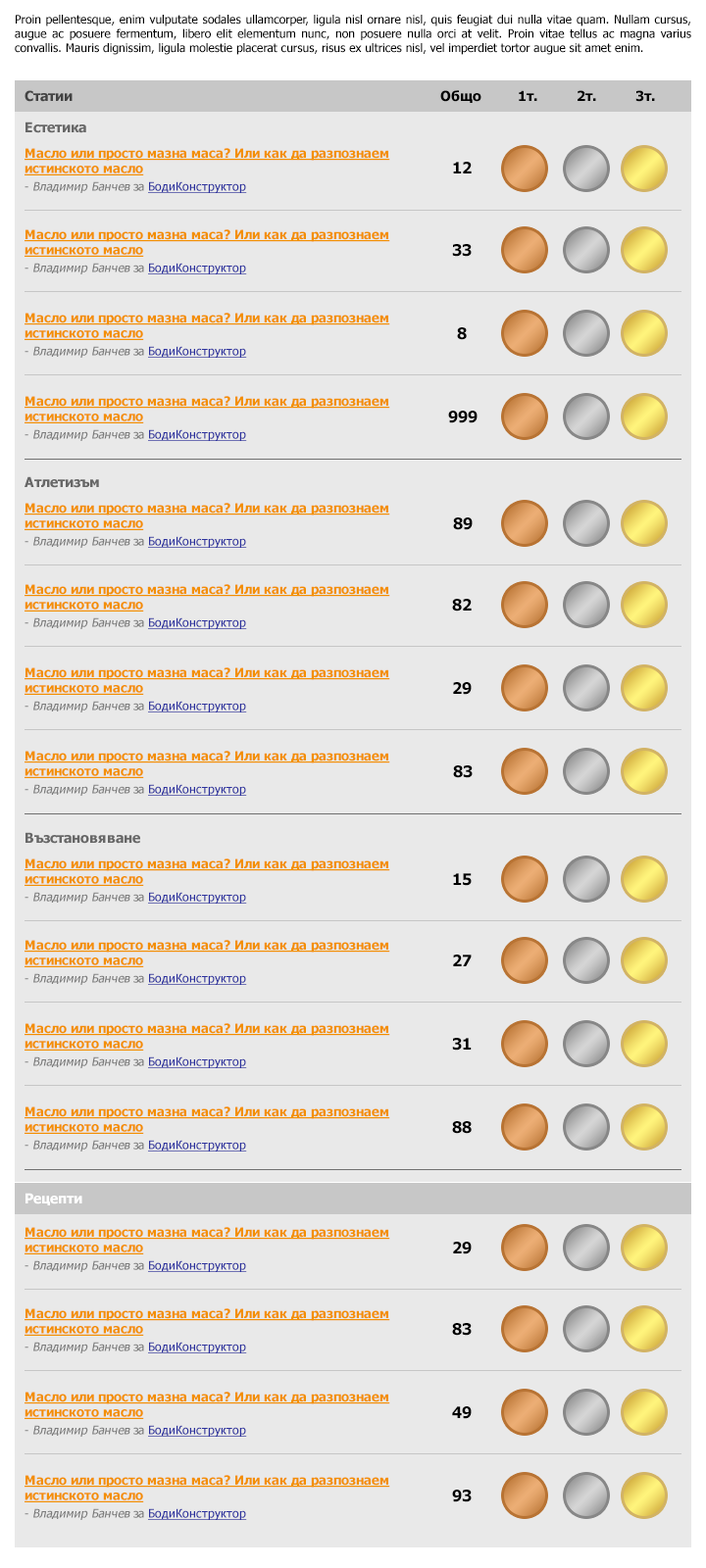
<style>
.page{position:relative;width:706px;height:1568px;background:#e9e9e9}
.page>*{position:absolute;margin:0}
.t1{font:11.8px "Tahoma";color:#000000}
.t2{font:13.7px "Tahoma-Bold";color:#434343}
.t3{font:13.7px "Tahoma-Bold";color:#000000}
.t4{font:13.7px "Tahoma-Bold";color:#676767}
.t5{font:12.7px "Tahoma-Bold";color:#f38f00;text-decoration:underline}
.t6{font:11.8px/17.6px "Tahoma";color:#7c7c7c}
.t7{font:11.8px/17.6px "Tahoma";color:#7c7c7c;font-style:italic}
.t8{font:11.8px/17.6px "Tahoma";color:#2c319e;text-decoration:underline}
.t9{font:15.7px "Tahoma-Bold";color:#000000}
.t10{font:13.7px "Tahoma-Bold";color:#ffffff}
</style>
<div class="page">
<p class="t1" style="left:15px;top:15px;width:676px;height:40px;text-align:justify">Proin pellentesque, enim vulputate sodales ullamcorper, ligula nisl ornare nisl, quis feugiat dui nulla vitae quam. Nullam cursus, augue ac posuere fermentum, libero elit elementum nunc, non posuere nulla orci at velit. Proin vitae tellus ac magna varius convallis. Mauris dignissim, ligula molestie placerat cursus, risus ex ultrices nisl, vel imperdiet tortor augue sit amet enim.</p>
<p class="t2" style="left:24px;top:90px;width:49px;height:12px">Статии</p>
<p class="t3" style="left:440px;top:90px;width:41px;height:13px">Общо</p>
<p class="t3" style="left:518px;top:90px;width:137px;height:12px">1т.          2т.          3т.</p>
<p class="t4" style="left:25px;top:122px;width:61px;height:11px">Естетика</p>
<p class="t5" style="left:24px;top:148px;width:366px;height:45px">Масло или просто мазна маса? Или как да разпознаем истинското масло<br><span class="t6">- </span><span class="t7">Владимир Банчев</span><span class="t6"> за </span><span class="t8">БодиКонструктор</span></p>
<p class="t9" style="left:453px;top:162px;width:18px;height:11px">12</p>
<p class="t5" style="left:24px;top:229px;width:366px;height:45px">Масло или просто мазна маса? Или как да разпознаем истинското масло<br><span class="t6">- </span><span class="t7">Владимир Банчев</span><span class="t6"> за </span><span class="t8">БодиКонструктор</span></p>
<p class="t9" style="left:452px;top:244px;width:19px;height:13px">33</p>
<p class="t5" style="left:24px;top:313px;width:366px;height:45px">Масло или просто мазна маса? Или как да разпознаем истинското масло<br><span class="t6">- </span><span class="t7">Владимир Банчев</span><span class="t6"> за </span><span class="t8">БодиКонструктор</span></p>
<p class="t9" style="left:457px;top:327px;width:9px;height:13px">8</p>
<p class="t5" style="left:24px;top:396px;width:366px;height:45px">Масло или просто мазна маса? Или как да разпознаем истинското масло<br><span class="t6">- </span><span class="t7">Владимир Банчев</span><span class="t6"> за </span><span class="t8">БодиКонструктор</span></p>
<p class="t9" style="left:448px;top:411px;width:29px;height:12px">999</p>
<p class="t4" style="left:24px;top:476px;width:75px;height:12px">Атлетизъм</p>
<p class="t5" style="left:24px;top:503px;width:366px;height:45px">Масло или просто мазна маса? Или как да разпознаем истинското масло<br><span class="t6">- </span><span class="t7">Владимир Банчев</span><span class="t6"> за </span><span class="t8">БодиКонструктор</span></p>
<p class="t9" style="left:453px;top:517px;width:19px;height:13px">89</p>
<p class="t5" style="left:24px;top:584px;width:366px;height:45px">Масло или просто мазна маса? Или как да разпознаем истинското масло<br><span class="t6">- </span><span class="t7">Владимир Банчев</span><span class="t6"> за </span><span class="t8">БодиКонструктор</span></p>
<p class="t9" style="left:452px;top:599px;width:19px;height:13px">82</p>
<p class="t5" style="left:24px;top:667px;width:366px;height:45px">Масло или просто мазна маса? Или как да разпознаем истинското масло<br><span class="t6">- </span><span class="t7">Владимир Банчев</span><span class="t6"> за </span><span class="t8">БодиКонструктор</span></p>
<p class="t9" style="left:453px;top:682px;width:18px;height:13px">29</p>
<p class="t5" style="left:24px;top:751px;width:366px;height:45px">Масло или просто мазна маса? Или как да разпознаем истинското масло<br><span class="t6">- </span><span class="t7">Владимир Банчев</span><span class="t6"> за </span><span class="t8">БодиКонструктор</span></p>
<p class="t9" style="left:453px;top:765px;width:19px;height:13px">83</p>
<p class="t4" style="left:25px;top:832px;width:115px;height:12px">Възстановяване</p>
<p class="t5" style="left:24px;top:858px;width:366px;height:46px">Масло или просто мазна маса? Или как да разпознаем истинското масло<br><span class="t6">- </span><span class="t7">Владимир Банчев</span><span class="t6"> за </span><span class="t8">БодиКонструктор</span></p>
<p class="t9" style="left:453px;top:873px;width:18px;height:13px">15</p>
<p class="t5" style="left:24px;top:940px;width:366px;height:45px">Масло или просто мазна маса? Или как да разпознаем истинското масло<br><span class="t6">- </span><span class="t7">Владимир Банчев</span><span class="t6"> за </span><span class="t8">БодиКонструктор</span></p>
<p class="t9" style="left:453px;top:955px;width:18px;height:11px">27</p>
<p class="t5" style="left:24px;top:1023px;width:366px;height:45px">Масло или просто мазна маса? Или как да разпознаем истинското масло<br><span class="t6">- </span><span class="t7">Владимир Банчев</span><span class="t6"> за </span><span class="t8">БодиКонструктор</span></p>
<p class="t9" style="left:452px;top:1038px;width:19px;height:13px">31</p>
<p class="t5" style="left:24px;top:1106px;width:366px;height:46px">Масло или просто мазна маса? Или как да разпознаем истинското масло<br><span class="t6">- </span><span class="t7">Владимир Банчев</span><span class="t6"> за </span><span class="t8">БодиКонструктор</span></p>
<p class="t9" style="left:452px;top:1121px;width:19px;height:13px">88</p>
<p class="t10" style="left:25px;top:1193px;width:57px;height:12px">Рецепти</p>
<p class="t5" style="left:24px;top:1227px;width:366px;height:45px">Масло или просто мазна маса? Или как да разпознаем истинското масло<br><span class="t6">- </span><span class="t7">Владимир Банчев</span><span class="t6"> за </span><span class="t8">БодиКонструктор</span></p>
<p class="t9" style="left:453px;top:1242px;width:18px;height:12px">29</p>
<p class="t5" style="left:24px;top:1308px;width:366px;height:45px">Масло или просто мазна маса? Или как да разпознаем истинското масло<br><span class="t6">- </span><span class="t7">Владимир Банчев</span><span class="t6"> за </span><span class="t8">БодиКонструктор</span></p>
<p class="t9" style="left:452px;top:1323px;width:19px;height:13px">83</p>
<p class="t5" style="left:24px;top:1392px;width:366px;height:45px">Масло или просто мазна маса? Или как да разпознаем истинското масло<br><span class="t6">- </span><span class="t7">Владимир Банчев</span><span class="t6"> за </span><span class="t8">БодиКонструктор</span></p>
<p class="t9" style="left:452px;top:1406px;width:19px;height:13px">49</p>
<p class="t5" style="left:24px;top:1475px;width:366px;height:45px">Масло или просто мазна маса? Или как да разпознаем истинското масло<br><span class="t6">- </span><span class="t7">Владимир Банчев</span><span class="t6"> за </span><span class="t8">БодиКонструктор</span></p>
<p class="t9" style="left:452px;top:1490px;width:19px;height:12px">93</p>
</div>
